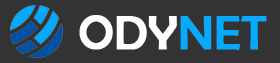
<style>
.page{position:relative;width:280px;height:63px;background:#333333}
.page>*{position:absolute;margin:0}
.t1{font:48px "BerlinSansFB-Reg";color:#ffffff;font-weight:bold}
.t2{font:48px "BerlinSansFB-Reg";color:#07a9fc;font-weight:bold}
</style>
<div class="page">
<p class="t1" style="left:79px;top:15px;width:188px;height:35px">ODY<span class="t2">NET</span></p>
</div>
